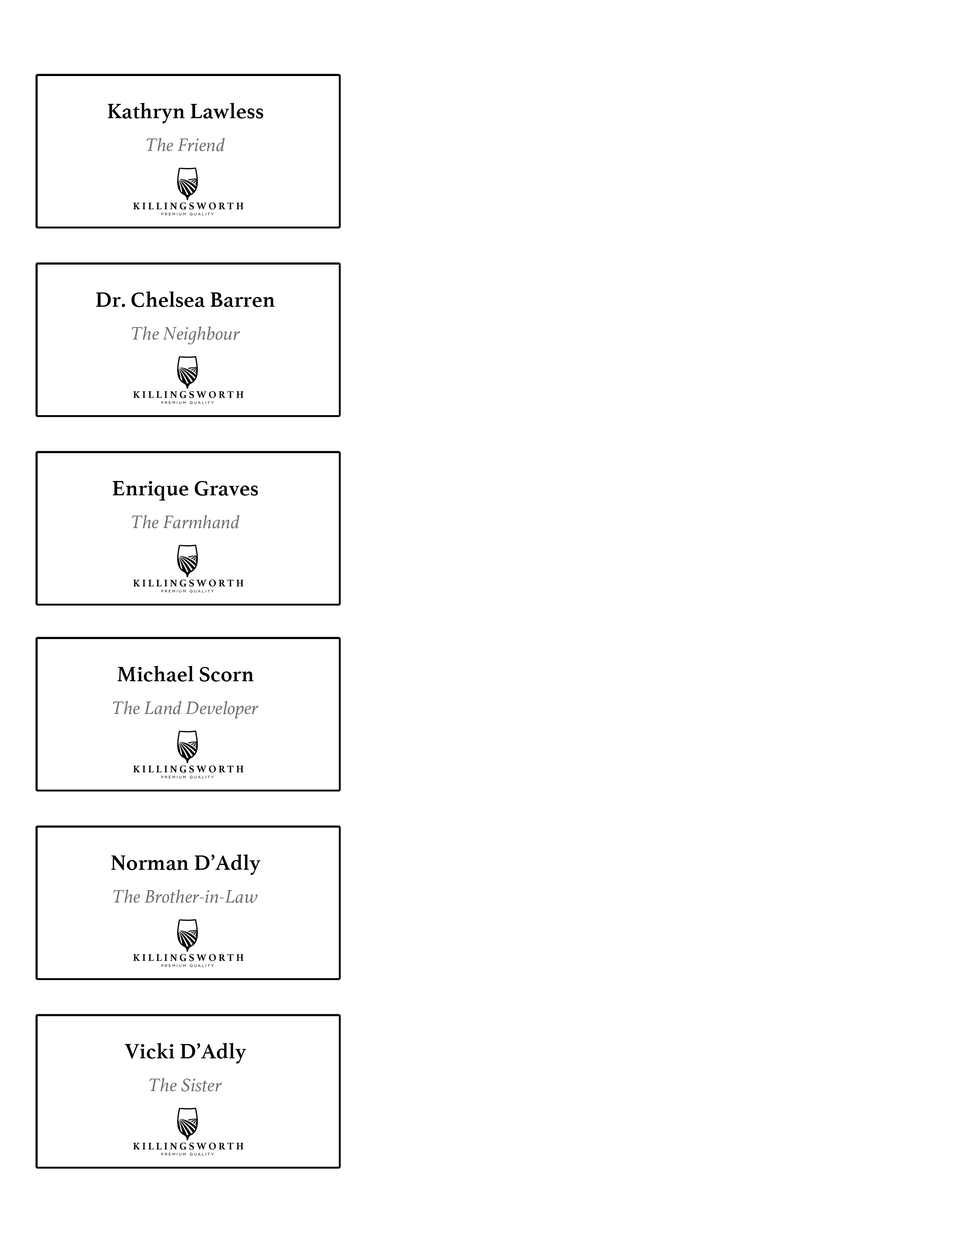
<style>
.page{position:relative;width:960px;height:1242px;background:#ffffff}
.page>*{position:absolute;margin:0}
.t1{font:22px "Athelas-Bold";color:#000000}
.t2{font:18.8px "Athelas-Italic";color:#717171}
</style>
<div class="page">
<p class="t1" style="left:108px;top:103px;width:156px;height:20px">Kathryn Lawless</p>
<p class="t2" style="left:146px;top:138px;width:79px;height:13px">The Friend</p>
<p class="t1" style="left:96px;top:291px;width:179px;height:16px">Dr. Chelsea Barren</p>
<p class="t2" style="left:131px;top:326px;width:109px;height:18px">The Neighbour</p>
<p class="t1" style="left:113px;top:481px;width:145px;height:20px">Enrique Graves</p>
<p class="t2" style="left:131px;top:515px;width:108px;height:14px">The Farmhand</p>
<p class="t1" style="left:117px;top:666px;width:137px;height:16px">Michael Scorn</p>
<p class="t2" style="left:113px;top:701px;width:146px;height:18px">The Land Developer</p>
<p class="t1" style="left:111px;top:855px;width:149px;height:20px">Norman D’Adly</p>
<p class="t2" style="left:113px;top:890px;width:145px;height:13px">The Brother-in-Law</p>
<p class="t1" style="left:125px;top:1043px;width:121px;height:21px">Vicki D’Adly</p>
<p class="t2" style="left:149px;top:1078px;width:73px;height:14px">The Sister</p>
</div>
